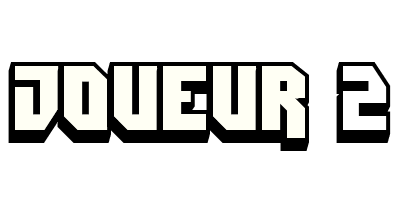
<style>
.page{position:relative;width:400px;height:200px;background:#ffffff}
.page>*{position:absolute;margin:0}
.t1{font:91.7px "DimitriSwank";color:#000000}
</style>
<div class="page">
<p class="t1" style="left:8px;top:62px;width:383px;height:89px">Joueur 2</p>
</div>
